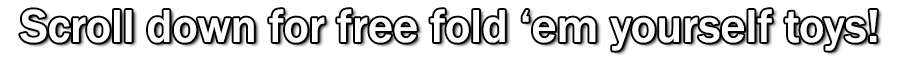
<style>
.page{position:relative;width:900px;height:60px;background:#ffffff}
.page>*{position:absolute;margin:0}
.t1{font:48px "FranklinGothic-Medium";color:#ffffff}
</style>
<div class="page">
<p class="t1" style="left:20px;top:9px;width:857px;height:42px">Scroll down for free fold ‘em yourself toys!</p>
</div>
